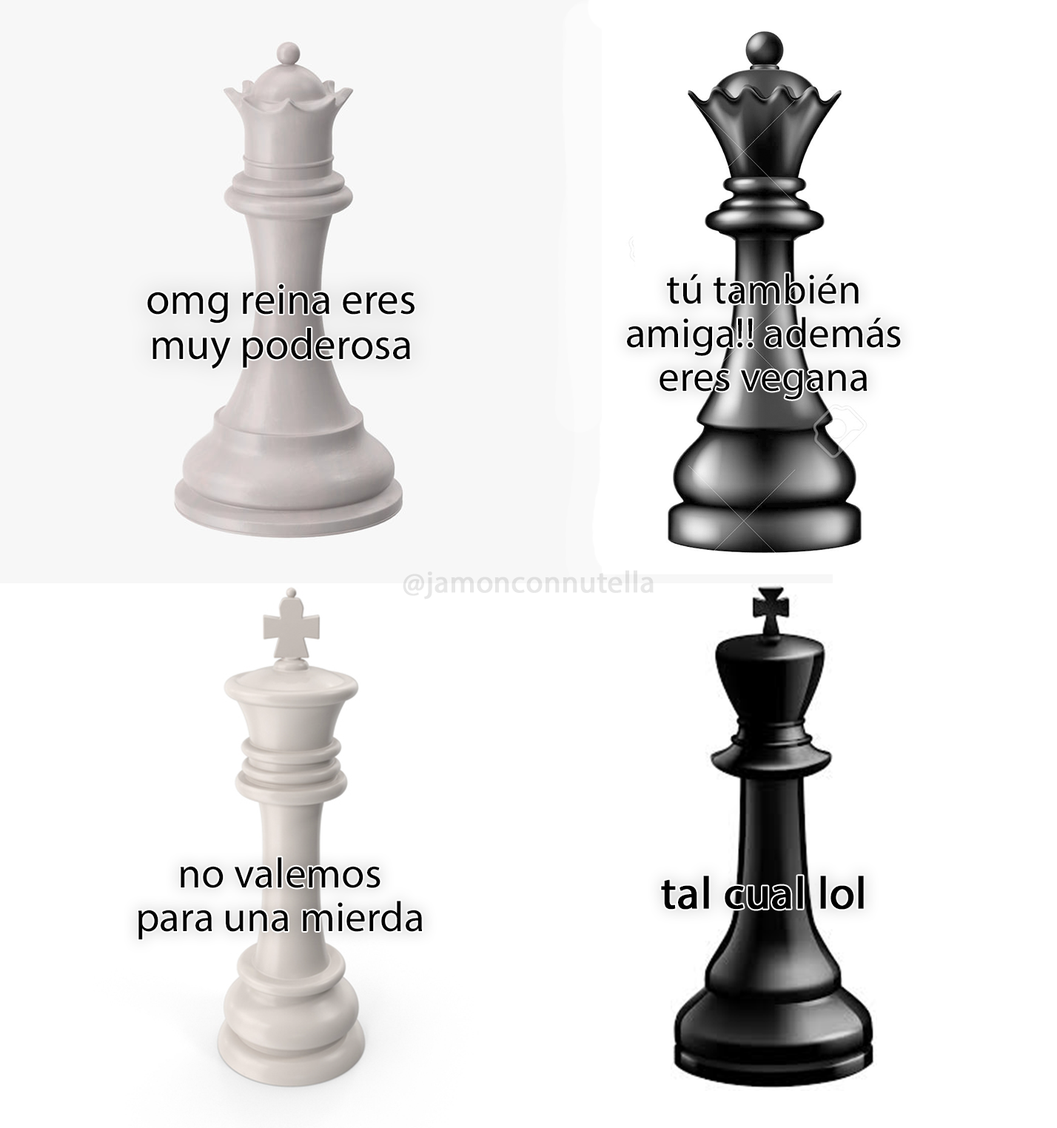
<style>
.page{position:relative;width:1057px;height:1128px;background:#ffffff}
.page>*{position:absolute;margin:0}
.t1{font:42.5px "MyriadPro-Regular";color:#000000}
.t2{font:43.9px "MyriadPro-Regular";color:#000000}
.t3{font:30.6px "MyriadPro-Regular";color:#e7e7e7;font-weight:bold}
.t4{font:45.6px "MyriadPro-Regular";color:#000000;font-weight:bold}
</style>
<div class="page">
<p class="t1" style="left:627px;top:273px;width:274px;height:127px;text-align:center">tú también<br>amiga!! además<br>eres vegana</p>
<p class="t2" style="left:147px;top:284px;width:268px;height:85px;text-align:center">omg reina eres<br>muy poderosa</p>
<p class="t3" style="left:403px;top:570px;width:251px;height:30px">@jamonconnutella</p>
<p class="t1" style="left:138px;top:857px;width:285px;height:83px;text-align:center">no valemos<br>para una mierda</p>
<p class="t4" style="left:661px;top:876px;width:203px;height:34px">tal cual lol</p>
</div>
